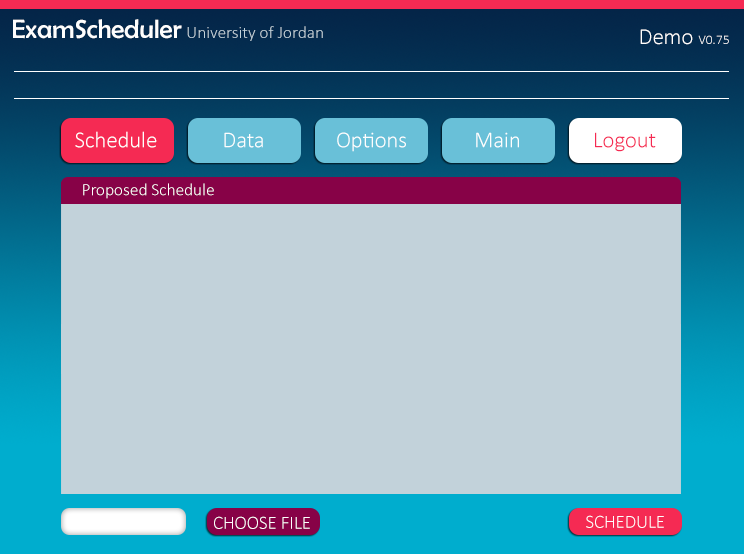
<style>
.page{position:relative;width:744px;height:554px;background:#c2d2da}
.page>*{position:absolute;margin:0}
.t1{font:26.7px "BerlinSansFB-Reg";color:#fefefe}
.t2{font:17.3px "Calibri-Light";color:#c2d2da}
.t3{font:13.3px "Calibri-Light";color:#fefefe}
.t4{font:22.7px "Calibri-Light";color:#fefefe}
.t5{font:22.7px "Calibri-Light";color:#f52a53}
.t6{font:17.3px "Calibri-Light";color:#ffffff}
.t7{font:18.7px "Calibri-Light";color:#fefefe}
</style>
<div class="page">
<p class="t1" style="left:13px;top:19px;width:169px;height:20px">ExamScheduler</p>
<p class="t2" style="left:187px;top:26px;width:136px;height:15px">University of Jordan</p>
<p class="t3" style="left:640px;top:29px;width:89px;height:16px"><span class="t4">Demo </span>V0.75</p>
<p class="t4" style="left:75px;top:131px;width:82px;height:17px">Schedule</p>
<p class="t4" style="left:224px;top:132px;width:39px;height:16px">Data</p>
<p class="t4" style="left:337px;top:132px;width:69px;height:20px">Options</p>
<p class="t4" style="left:476px;top:132px;width:43px;height:16px">Main</p>
<p class="t5" style="left:595px;top:132px;width:61px;height:20px">Logout</p>
<p class="t6" style="left:83px;top:183px;width:131px;height:16px">Proposed Schedule</p>
<p class="t7" style="left:214px;top:516px;width:96px;height:13px">CHOOSE FILE</p>
<p class="t7" style="left:586px;top:515px;width:78px;height:13px">SCHEDULE</p>
</div>
